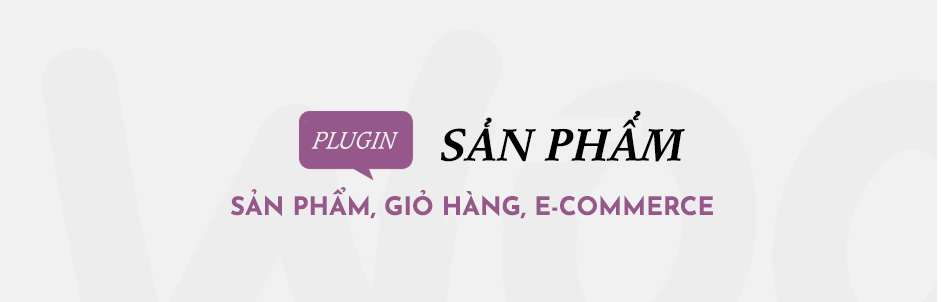
<style>
.page{position:relative;width:941px;height:302px;background:#f1f1f1}
.page>*{position:absolute;margin:0}
.t1{font:44px "UVNThayGiaoBoldItalic";color:#010101}
.t2{font:25.3px "UVNCatBienNheItalic";color:#ededed}
.t3{font:25.3px "JosefinSans-Bold";color:#96588a}
</style>
<div class="page">
<p class="t1" style="left:441px;top:110px;width:244px;height:52px">SẢN PHẨM</p>
<p class="t2" style="left:311px;top:131px;width:88px;height:18px">PLUGIN</p>
<p class="t3" style="left:231px;top:187px;width:482px;height:32px">SẢN PHẨM, GIỎ HÀNG, E-COMMERCE</p>
</div>
